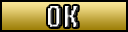
<style>
.page{position:relative;width:128px;height:32px;background:#000000}
.page>*{position:absolute;margin:0}
.t1{font:30px "Fixedsys";scale:0.9 1}
</style>
<div class="page">
<p class="t1" style="left:48px;top:6px;width:30px;height:21px">OK</p>
</div>
